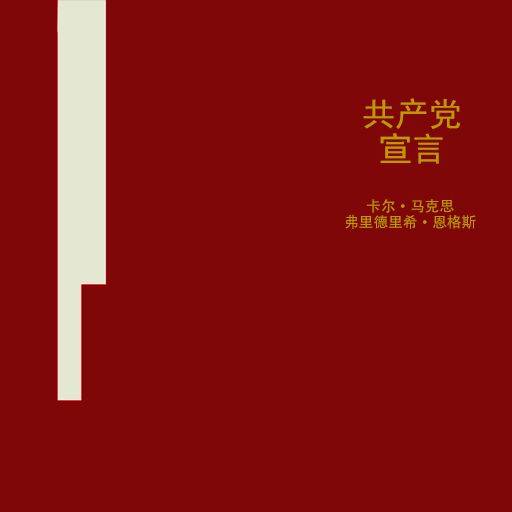
<style>
.page{position:relative;width:512px;height:512px;background:#7f0707}
.page>*{position:absolute;margin:0}
.t1{font:33.3px/34.7px "SimHei";color:#c19705}
.t2{font:14.7px/16px "AdobeHeitiStd-Regular";color:#c19705}
</style>
<div class="page">
<p class="t1" style="left:363px;top:98px;width:98px;height:66px;text-align:center">共产党<br>宣言</p>
<p class="t2" style="left:345px;top:199px;width:131px;height:30px;text-align:center">卡尔·马克思<br>弗里德里希·恩格斯</p>
</div>
